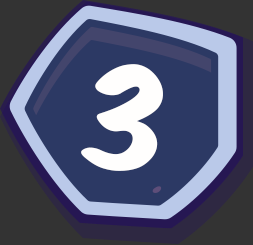
<style>
.page{position:relative;width:253px;height:245px;background:#2c3964}
.page>*{position:absolute;margin:0}
.t1{font:120px "KomikaAxis";color:#fffefd}
</style>
<div class="page">
<p class="t1" style="left:81px;top:64px;width:82px;height:107px">3</p>
</div>
